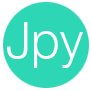
<style>
.page{position:relative;width:91px;height:91px;background:#2dd6b5}
.page>*{position:absolute;margin:0}
.t1{font:50px "HelveticaNeue-Light";color:#ffffff}
</style>
<div class="page">
<p class="t1" style="left:7px;top:22px;width:76px;height:46px">Jpy</p>
</div>
